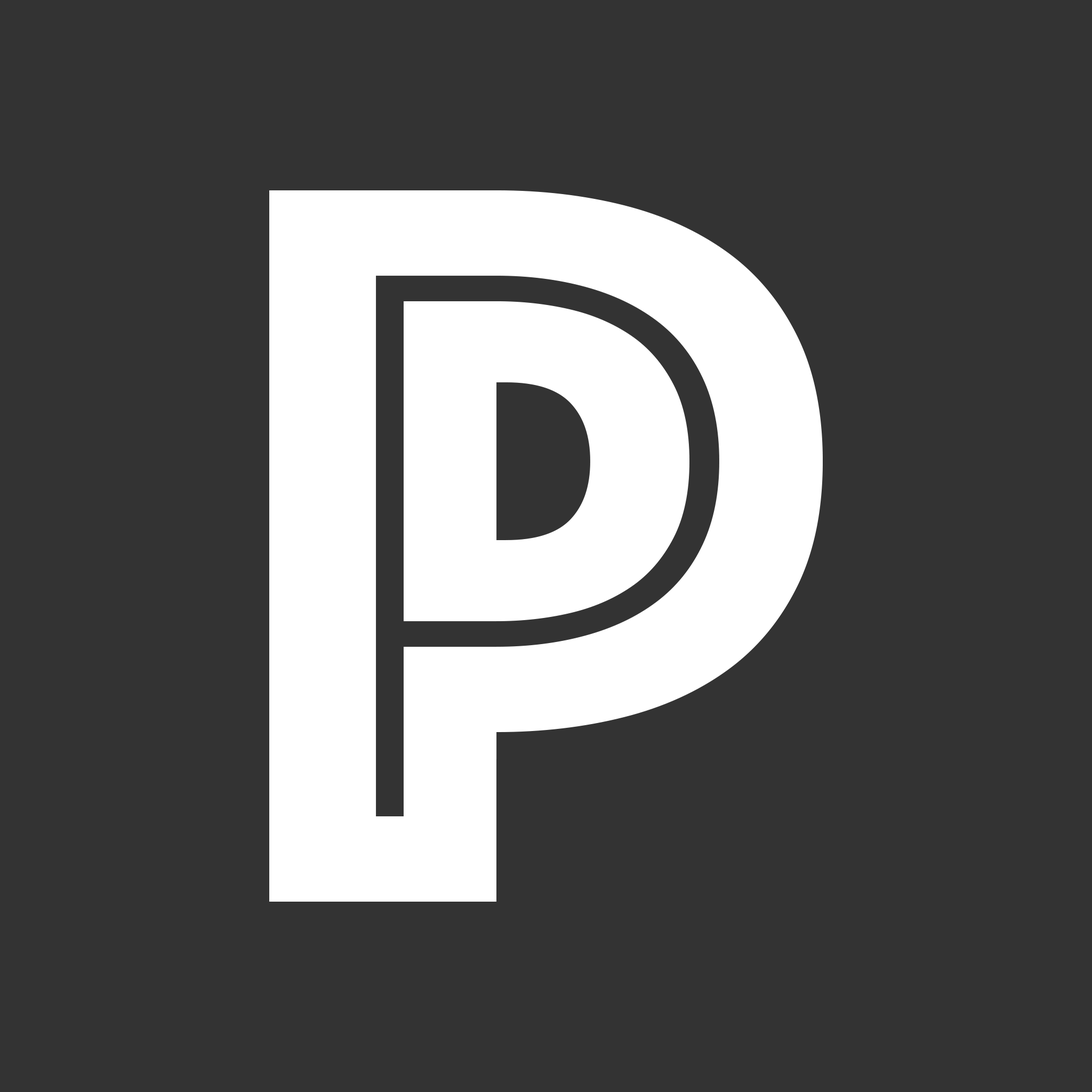
<style>
.page{position:relative;width:1092px;height:1092px;background:#333333}
.page>*{position:absolute;margin:0}
.t1{font:1066.4px "Phosphate-Inline";color:#ffffff}
</style>
<div class="page">
<p class="t1" style="left:269px;top:190px;width:554px;height:712px">p</p>
</div>
